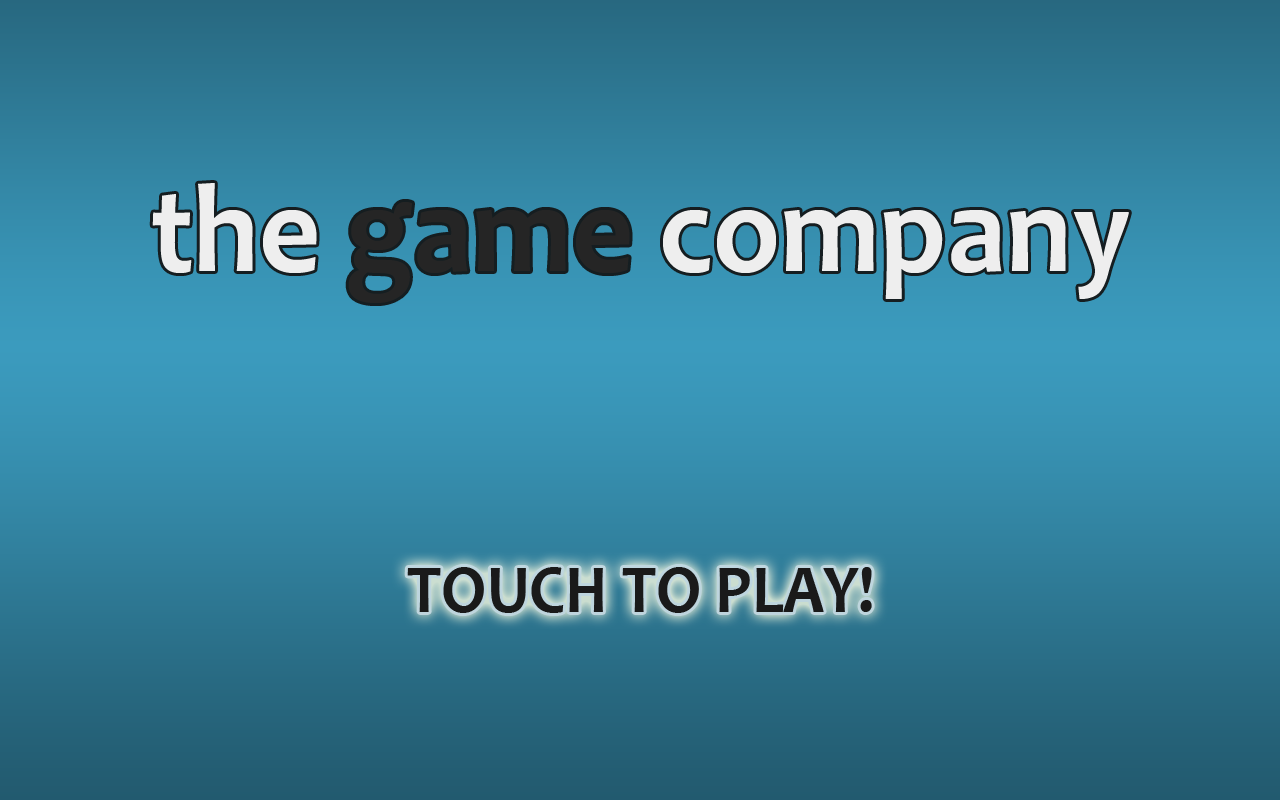
<style>
.page{position:relative;width:1280px;height:800px}
.page>*{position:absolute;margin:0}
.t1{font:127.2px "Candara-Bold";color:#eeeeee;scale:0.94 1}
.t2{font:127.2px "Candara-Bold";color:#252525;scale:0.94 1}
.t3{font:68.9px "Candara-Bold";color:#1a1a1a;scale:0.94 1}
</style>
<div class="page">
<p class="t1" style="left:152px;top:183px;width:977px;height:120px">the <span class="t2">game</span> company</p>
<p class="t3" style="left:407px;top:567px;width:465px;height:46px">TOUCH TO PLAY!</p>
</div>
